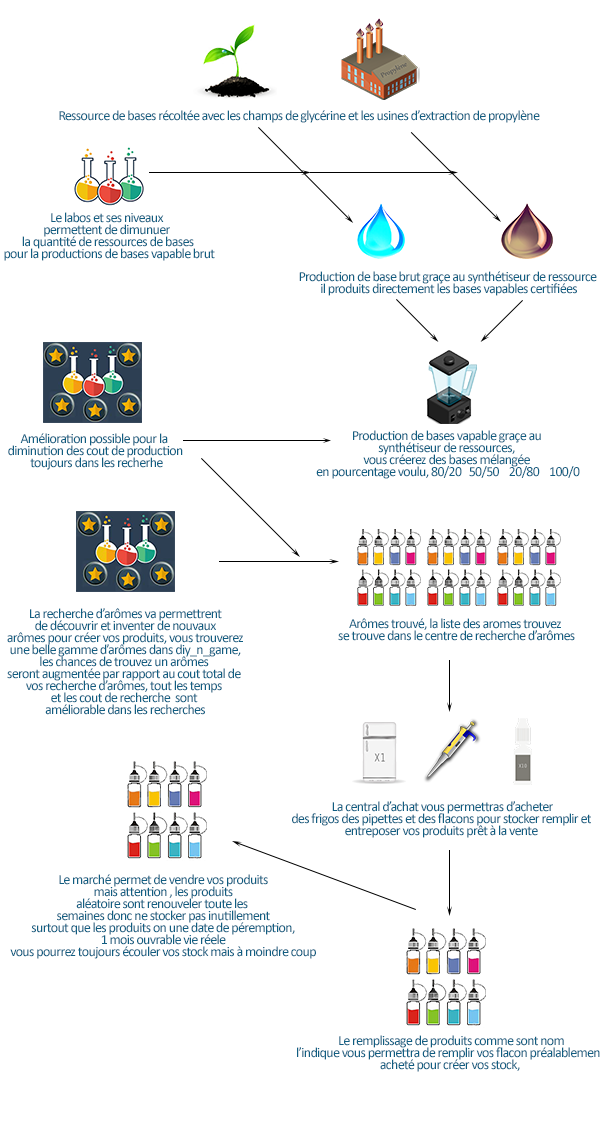
<style>
.page{position:relative;width:600px;height:1134px;background:#ffffff}
.page>*{position:absolute;margin:0}
.t1{font:14px "Calibri";letter-spacing:-0.05em;color:#105e82}
.t2{font:14px/12px "Calibri";letter-spacing:-0.05em;color:#105e82}
</style>
<div class="page">
<p class="t1" style="left:59px;top:110px;width:481px;height:13px">Ressource de bases récoltée avec les champs de glycérine et les usines d’extraction de propylène</p>
<p class="t2" style="left:4px;top:212px;width:211px;height:49px;text-align:center">Le labos et ses niveaux <br>permettent de dimunuer <br>la quantité de ressources de bases<br> pour la productions de bases vapable brut</p>
<p class="t2" style="left:299px;top:271px;width:298px;height:25px;text-align:center">Production de base brut graçe au synthétiseur de ressource <br>il produits directement les bases vapables certifiées</p>
<p class="t2" style="left:8px;top:433px;width:175px;height:37px;text-align:center">Amélioration possible pour la <br>diminution des cout de production<br> toujours dans les recherhe</p>
<p class="t2" style="left:316px;top:430px;width:264px;height:49px;text-align:center">Production de bases vapable graçe au <br>synthétiseur de ressources, <br>vous créerez des bases mélangée <br>en pourcentage voulu, 80/20   50/50    20/80    100/0</p>
<p class="t2" style="left:7px;top:608px;width:236px;height:107px;text-align:center">La recherche d’arômes va permettrent<br> de découvrir et inventer de nouvaux <br>arômes pour créer vos produits, vous trouverez<br> une belle gamme d’arômes dans diy_n_game, <br>les chances de trouvez un arômes <br>seront augmentée par rapport au cout total de <br>vos recherche d’arômes, tout les temps <br>et les cout de recherche  sont <br>améliorable dans les recherches</p>
<p class="t2" style="left:338px;top:618px;width:237px;height:23px;text-align:center">Arômes trouvé, la liste des aromes trouvez <br>se trouve dans le centre de recherche d’arômes</p>
<p class="t2" style="left:292px;top:801px;width:299px;height:37px;text-align:center">La central d’achat vous permettras d’acheter<br>des frigos des pipettes et des flacons pour stocker remplir et <br>entreposer vos produits prêt à la vente</p>
<p class="t2" style="left:10px;top:874px;width:306px;height:85px;text-align:center">Le marché permet de vendre vos produits<br>mais attention , les produits<br>aléatoire sont renouveler toute les <br>semaines donc ne stocker pas inutillement<br>surtout que les produits on une date de péremption,<br>1 mois ouvrable vie réele<br>vous pourrez toujours écouler vos stock mais à moindre coup</p>
</div>
